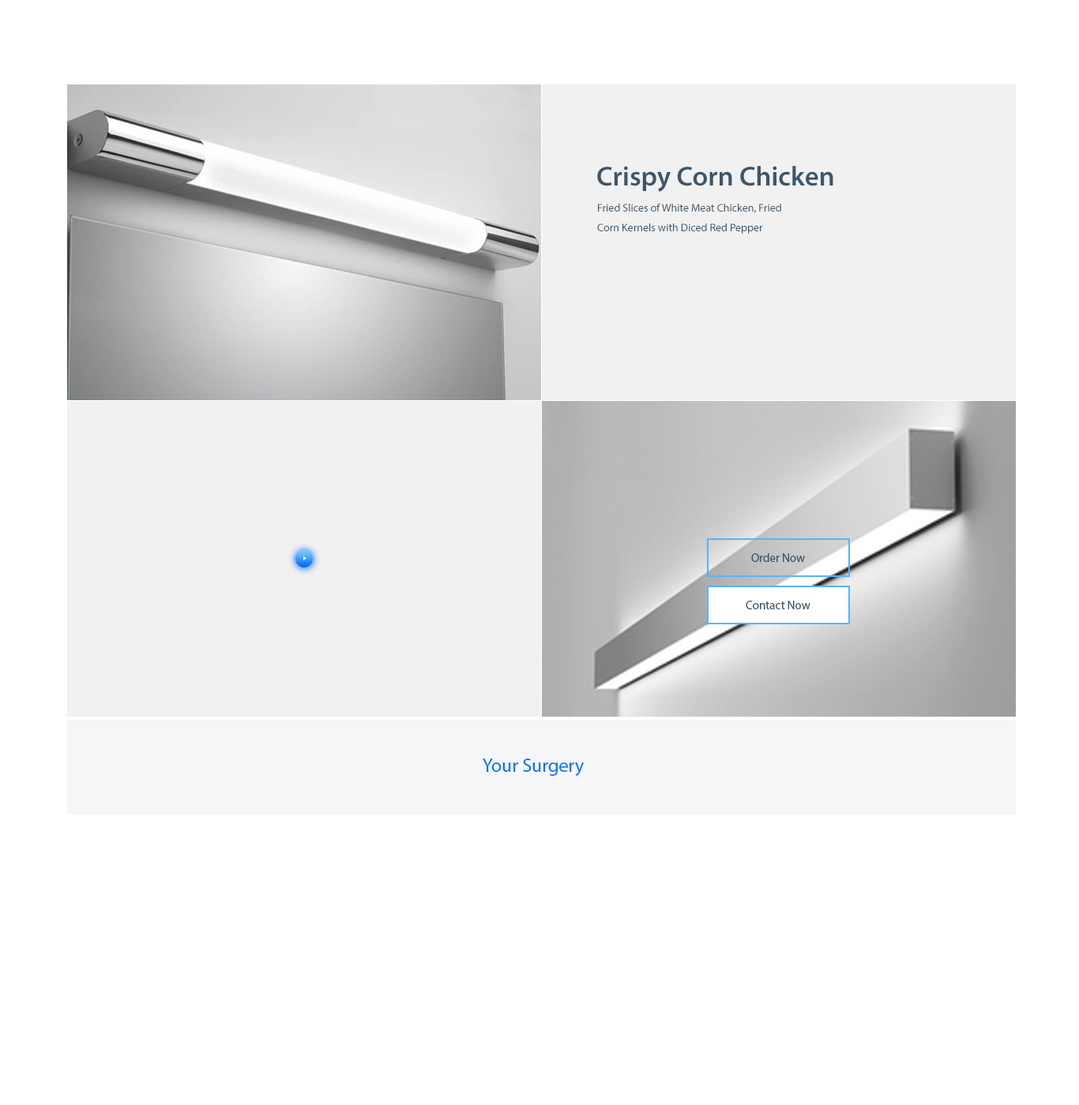
<style>
.page{position:relative;width:1079px;height:1105px;background:#ffffff}
.page>*{position:absolute;margin:0}
.t1{font:27.6px "MyriadPro-Semibold";color:#3d5669}
.t2{font:11.1px/19.7px "MyriadPro-Regular";color:#3d5669}
.t3{font:11.8px "MyriadPro-Regular";color:#3d5669}
.t4{font:19px "MyriadPro-Regular";color:#0b71fd}
</style>
<div class="page">
<p class="t1" style="left:597px;top:166px;width:236px;height:26px">Crispy Corn Chicken</p>
<p class="t2" style="left:597px;top:204px;width:184px;height:30px">Fried Slices of White Meat Chicken, Fried<br>Corn Kernels with Diced Red Pepper</p>
<p class="t3" style="left:751px;top:554px;width:54px;height:8px">Order Now</p>
<p class="t3" style="left:745px;top:601px;width:65px;height:9px">Contact Now</p>
<p class="t4" style="left:482px;top:759px;width:102px;height:17px">Your Surgery</p>
</div>
